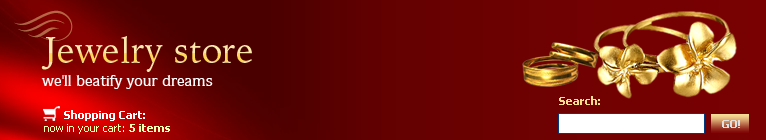
<style>
.page{position:relative;width:766px;height:140px}
.page>*{position:absolute;margin:0}
.t1{font:36px "IowanOldStyleBT-Roman"}
.t2{font:16px "QuorumITCbyBT-Medium";color:#fdfbfb}
.t3{font:11px "Tahoma-Bold";color:#fede89}
.t4{font:11px "Tahoma-Bold";color:#ffffff}
.t5{font:11px "Tahoma";color:#ffffb4}
.t6{font:11px "Tahoma-Bold";color:#ffffb4}
.t7{font:11px "Tahoma-Bold";color:#e0e0e0;text-transform:uppercase}
</style>
<div class="page">
<p class="t1" style="left:41px;top:36px;width:211px;height:36px">Jewelry store</p>
<p class="t2" style="left:41px;top:75px;width:172px;height:14px">we'll beatify your dreams</p>
<p class="t3" style="left:559px;top:96px;width:41px;height:9px">Search:</p>
<p class="t4" style="left:64px;top:110px;width:81px;height:11px">Shopping Cart:</p>
<p class="t5" style="left:44px;top:124px;width:126px;height:10px">now in your cart: <span class="t6">5 items</span></p>
<p class="t7" style="left:722px;top:120px;width:18px;height:8px">GO!</p>
</div>
